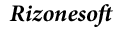
<style>
.page{position:relative;width:121px;height:30px;background:#ffffff}
.page>*{position:absolute;margin:0}
.t1{font:24px "MinionPro-BoldIt";color:#000000}
</style>
<div class="page">
<p class="t1" style="left:9px;top:4px;width:104px;height:23px">Rizonesoft</p>
</div>
